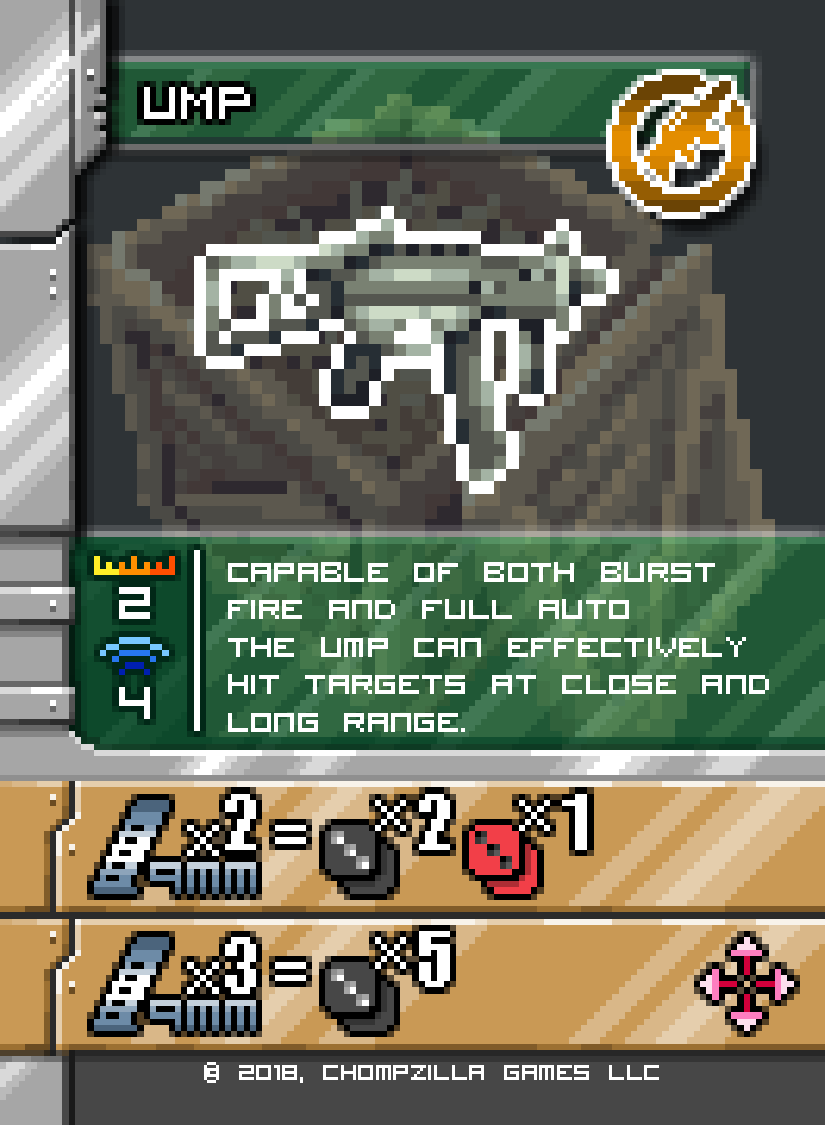
<style>
.page{position:relative;width:825px;height:1125px}
.page>*{position:absolute;margin:0}
.t1{font:50px/37.5px "VisitorTT2BRK";color:#ffffff}
.t2{font:37.5px "VisitorTT2BRK";color:#ffffff}
</style>
<div class="page">
<p class="t1" style="left:228px;top:562px;width:541px;height:170px">Capable of both burst <br>fire and full auto <br>the ump can effectively<br>hit targets at close and<br>long range.</p>
<p class="t2" style="left:204px;top:1062px;width:455px;height:21px">© 2018, Chompzilla Games LLC</p>
</div>
